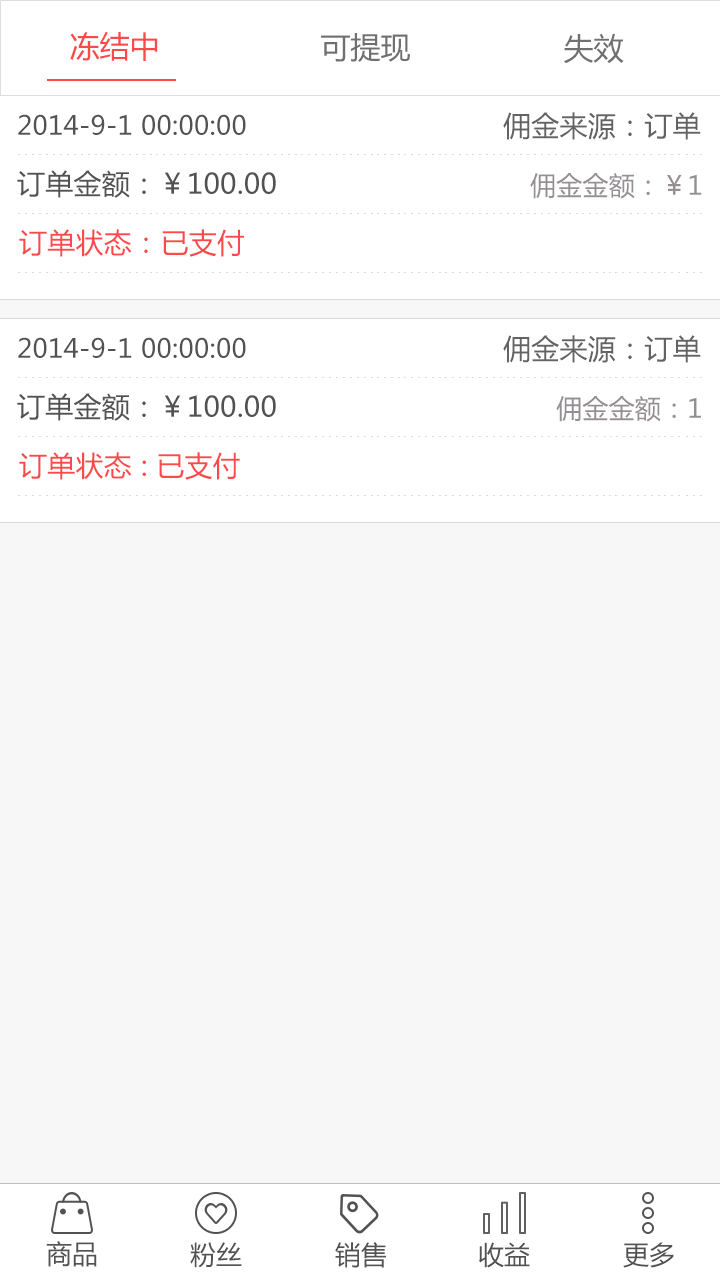
<style>
.page{position:relative;width:720px;height:1280px;background:#f7f7f7}
.page>*{position:absolute;margin:0}
.t1{font:30px "MicrosoftYaHei";color:#fc4a4a}
.t2{font:30px "MicrosoftYaHei";color:#707070}
.t3{font:28px "MicrosoftYaHei";letter-spacing:0.01em;color:#636363}
.t4{font:26px "MicrosoftYaHei";letter-spacing:0.01em;color:#525252}
.t5{font:28px "MicrosoftYaHei";letter-spacing:0.01em;color:#525252}
.t6{font:26px "MicrosoftYaHei";letter-spacing:0.01em;color:#958f93}
.t7{font:28px "MicrosoftYaHei";letter-spacing:0.01em;color:#fc4a4a}
.t8{font:26px "MicrosoftYaHei";color:#525252}
</style>
<div class="page">
<p class="t1" style="left:70px;top:31px;width:88px;height:30px">冻结中</p>
<p class="t2" style="left:321px;top:33px;width:89px;height:29px">可提现</p>
<p class="t2" style="left:564px;top:33px;width:60px;height:31px">失效</p>
<p class="t3" style="left:503px;top:112px;width:198px;height:28px">佣金来源：订单</p>
<p class="t4" style="left:18px;top:114px;width:228px;height:21px">2014-9-1 00:00:00</p>
<p class="t5" style="left:17px;top:170px;width:259px;height:28px">订单金额：￥100.00</p>
<p class="t6" style="left:530px;top:173px;width:172px;height:26px">佣金金额：￥1</p>
<p class="t7" style="left:19px;top:229px;width:225px;height:28px">订单状态：已支付</p>
<p class="t4" style="left:18px;top:337px;width:228px;height:21px">2014-9-1 00:00:00</p>
<p class="t3" style="left:503px;top:335px;width:198px;height:28px">佣金来源：订单</p>
<p class="t5" style="left:17px;top:393px;width:259px;height:28px">订单金额：￥100.00</p>
<p class="t6" style="left:556px;top:396px;width:145px;height:26px">佣金金额：1</p>
<p class="t7" style="left:19px;top:452px;width:221px;height:28px">订单状态 : 已支付</p>
<p class="t8" style="left:46px;top:1241px;width:51px;height:26px">商品</p>
<p class="t8" style="left:190px;top:1242px;width:52px;height:26px">粉丝</p>
<p class="t8" style="left:335px;top:1242px;width:51px;height:26px">销售</p>
<p class="t8" style="left:479px;top:1242px;width:51px;height:26px">收益</p>
<p class="t8" style="left:623px;top:1242px;width:51px;height:26px">更多</p>
</div>
